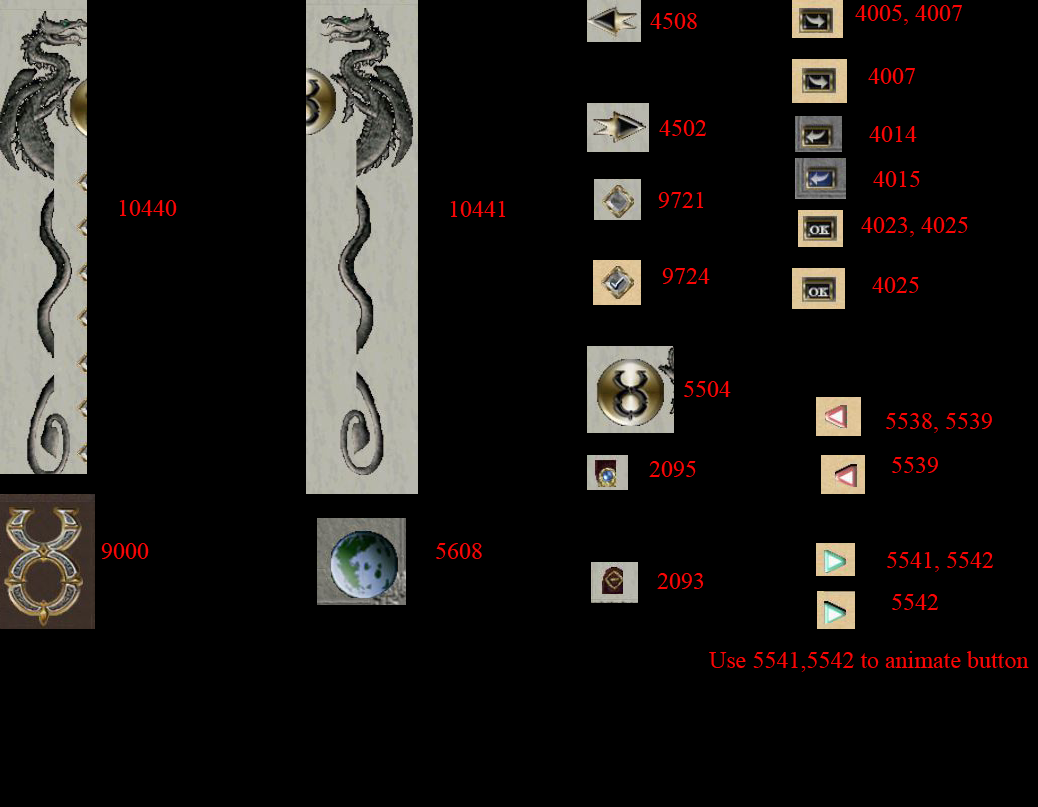
<style>
.page{position:relative;width:1038px;height:807px;background:#000000}
.page>*{position:absolute;margin:0}
.t1{font:24px "TimesNewRomanPSMT";color:#fa0505}
</style>
<div class="page">
<p class="t1" style="left:855px;top:5px;width:107px;height:20px">4005, 4007</p>
<p class="t1" style="left:650px;top:13px;width:47px;height:16px">4508</p>
<p class="t1" style="left:868px;top:68px;width:47px;height:16px">4007</p>
<p class="t1" style="left:659px;top:120px;width:47px;height:16px">4502</p>
<p class="t1" style="left:869px;top:126px;width:48px;height:16px">4014</p>
<p class="t1" style="left:873px;top:171px;width:47px;height:16px">4015</p>
<p class="t1" style="left:658px;top:192px;width:46px;height:16px">9721</p>
<p class="t1" style="left:119px;top:200px;width:58px;height:16px">10440</p>
<p class="t1" style="left:450px;top:201px;width:56px;height:16px">10441</p>
<p class="t1" style="left:861px;top:217px;width:107px;height:20px">4023, 4025</p>
<p class="t1" style="left:662px;top:268px;width:48px;height:16px">9724</p>
<p class="t1" style="left:872px;top:277px;width:47px;height:16px">4025</p>
<p class="t1" style="left:684px;top:381px;width:47px;height:16px">5504</p>
<p class="t1" style="left:886px;top:413px;width:106px;height:20px">5538, 5539</p>
<p class="t1" style="left:649px;top:461px;width:47px;height:16px">2095</p>
<p class="t1" style="left:892px;top:457px;width:46px;height:16px">5539</p>
<p class="t1" style="left:101px;top:543px;width:48px;height:16px">9000</p>
<p class="t1" style="left:436px;top:543px;width:46px;height:16px">5608</p>
<p class="t1" style="left:887px;top:552px;width:106px;height:20px">5541, 5542</p>
<p class="t1" style="left:657px;top:573px;width:47px;height:16px">2093</p>
<p class="t1" style="left:892px;top:594px;width:46px;height:16px">5542</p>
<p class="t1" style="left:709px;top:651px;width:320px;height:21px">Use 5541,5542 to animate button</p>
</div>
